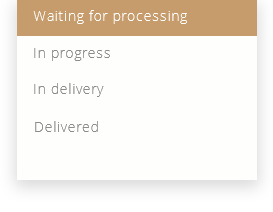
<style>
.page{position:relative;width:273px;height:212px;background:#fefefd}
.page>*{position:absolute;margin:0}
.t1{font:14px "OpenSans-Light";letter-spacing:0.05em;color:#fefefd}
.t2{font:14px "OpenSans-Light";letter-spacing:0.05em;color:#8c8c8c}
</style>
<div class="page">
<p class="t1" style="left:33px;top:10px;width:154px;height:14px">Waiting for processing</p>
<p class="t2" style="left:34px;top:48px;width:76px;height:13px">In progress</p>
<p class="t2" style="left:34px;top:83px;width:70px;height:14px">In delivery</p>
<p class="t2" style="left:35px;top:121px;width:63px;height:11px">Delivered</p>
</div>
